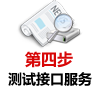
<style>
.page{position:relative;width:100px;height:90px;background:#ffffff}
.page>*{position:absolute;margin:0}
.t1{font:16px "MicrosoftYaHei";color:#d70707}
.t2{font:14px "MicrosoftYaHei";color:#000000}
</style>
<div class="page">
<p class="t1" style="left:25px;top:51px;width:48px;height:17px">第四步</p>
<p class="t2" style="left:8px;top:72px;width:84px;height:14px">测试接口服务</p>
</div>
